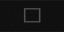
<style>
.page{position:relative;width:64px;height:32px;background:#101010}
.page>*{position:absolute;margin:0}
.t1{font:18.2px "DejaVuSansCondensed";color:#525252;scale:1.3 1}
</style>
<div class="page">
<p class="t1" style="left:23px;top:8px;width:18px;height:15px">□</p>
</div>
